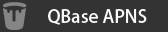
<style>
.page{position:relative;width:168px;height:32px;background:#333333}
.page>*{position:absolute;margin:0}
.t1{font:18px "AdobeHeitiStd-Regular";color:#fcf8f8}
</style>
<div class="page">
<p class="t1" style="left:48px;top:9px;width:99px;height:16px">QBase APNS</p>
</div>
